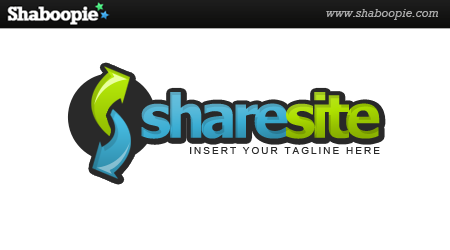
<style>
.page{position:relative;width:450px;height:250px;background:#ffffff}
.page>*{position:absolute;margin:0}
.t1{font:60px "Tahoma-Bold";letter-spacing:-0.075em}
.t2{font:10px "ArialMT";letter-spacing:0.2em;color:#292929}
</style>
<div class="page">
<p class="t1" style="left:141px;top:92px;width:239px;height:47px">sharesite</p>
<p class="t2" style="left:190px;top:147px;width:190px;height:7px">INSERT YOUR TAGLINE HERE</p>
</div>
